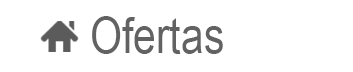
<style>
.page{position:relative;width:353px;height:72px;background:#ffffff}
.page>*{position:absolute;margin:0}
.t1{font:50px "ArialNarrow";color:#626262}
</style>
<div class="page">
<p class="t1" style="left:92px;top:16px;width:131px;height:38px">Ofertas</p>
</div>
